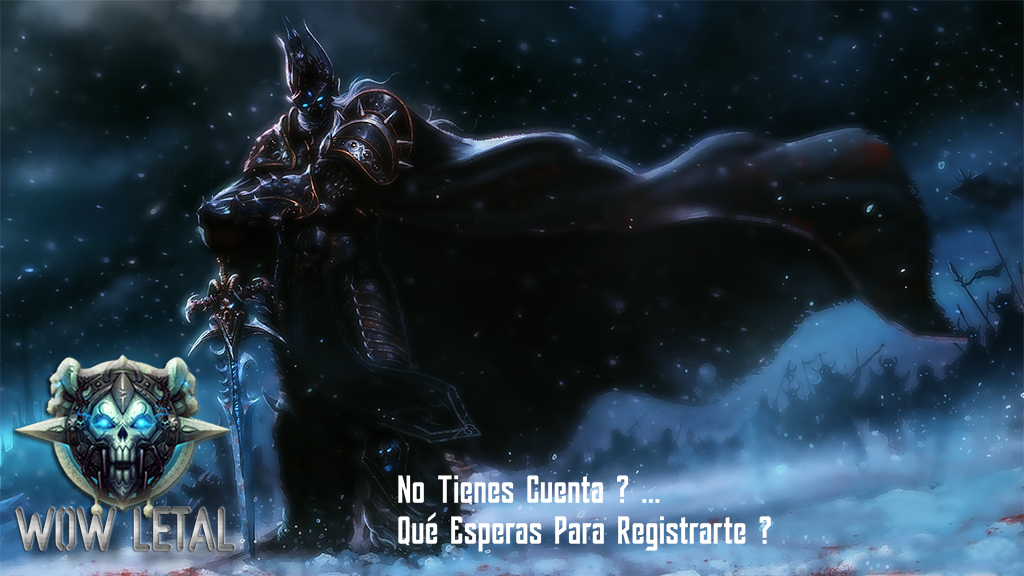
<style>
.page{position:relative;width:1024px;height:576px}
.page>*{position:absolute;margin:0}
.t1{font:34.1px "yorkbailehill";color:#ffffff}
</style>
<div class="page">
<p class="t1" style="left:398px;top:475px;width:373px;height:77px">No Tienes Cuenta ? ...<br>Qué Esperas Para Registrarte ?<br>Q</p>
</div>
